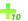
<style>
.page{position:relative;width:28px;height:21px;background:#ffffff}
.page>*{position:absolute;margin:0}
.t1{font:8.6px "MyriadPro-BoldIt";color:#63d134}
</style>
<div class="page">
<p class="t1" style="left:12px;top:14px;width:9px;height:6px">10</p>
</div>
